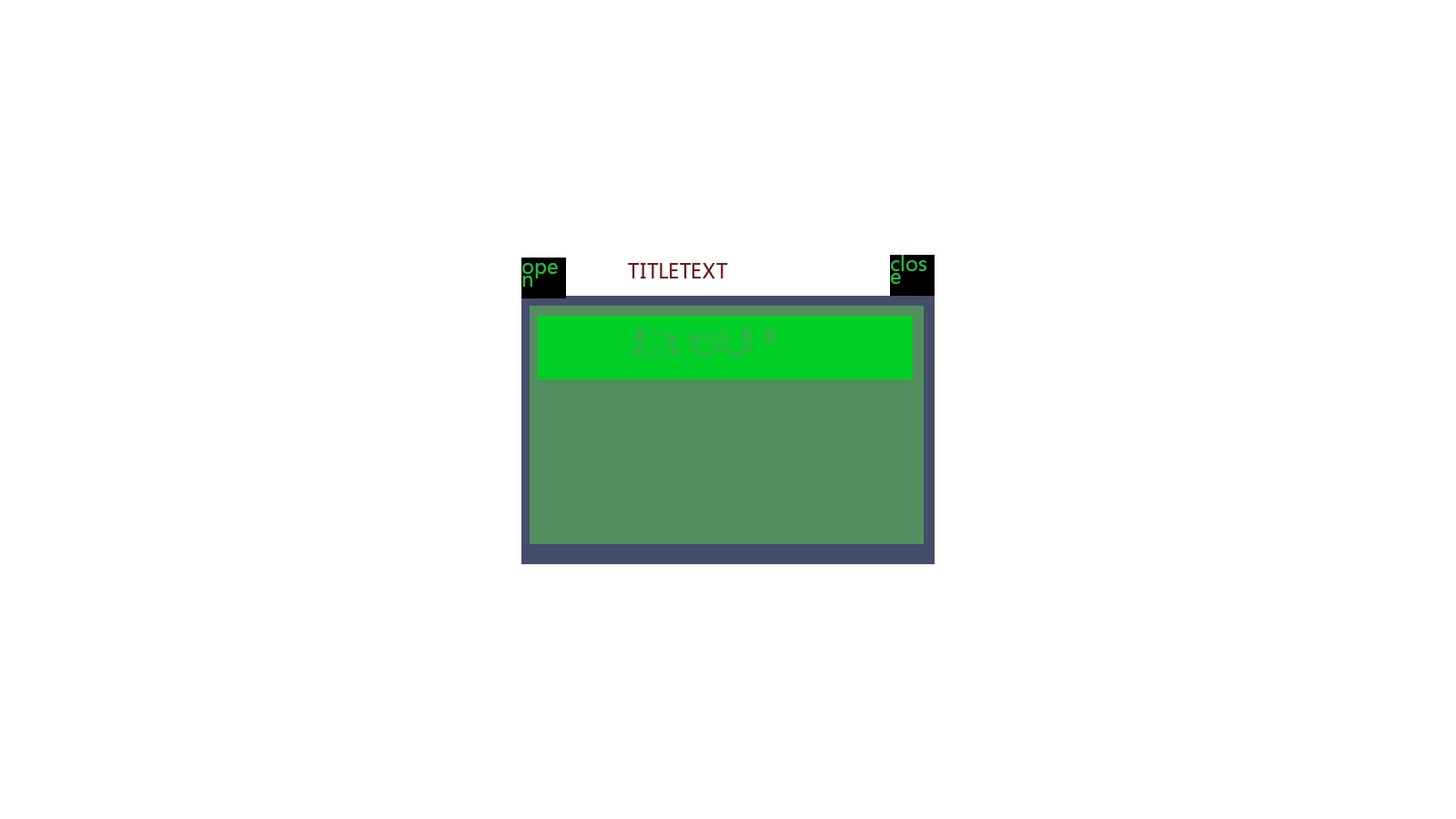
<style>
.page{position:relative;width:1456px;height:819px;background:#ffffff}
.page>*{position:absolute;margin:0}
.t1{font:20px "MicrosoftYaHei";color:#28b743}
.t2{font:20px "MicrosoftYaHei";letter-spacing:0.05em;color:#681d1d;text-transform:uppercase}
.t3{font:20px "MicrosoftYaHei";color:#28b743;scale:4.49 1}
</style>
<div class="page">
<p class="t1" style="left:891px;top:255px;width:36px;height:29px">close</p>
<p class="t1" style="left:522px;top:263px;width:36px;height:24px">open</p>
<p class="t2" style="left:628px;top:263px;width:100px;height:15px">titleText</p>
<p class="t3" style="left:632px;top:328px;width:142px;height:29px">hellow item</p>
<p class="t3" style="left:632px;top:328px;width:142px;height:29px">hellow item</p>
</div>
